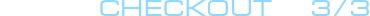
<style>
.page{position:relative;width:370px;height:16px;background:#ffffff}
.page>*{position:absolute;margin:0}
.t1{font:24px "MicrogrammaD-MediExte";letter-spacing:0.075em;color:#8dd9ff;text-transform:uppercase}
</style>
<div class="page">
<p class="t1" style="left:100px;top:0px;width:172px;height:16px">Checkout</p>
</div>
